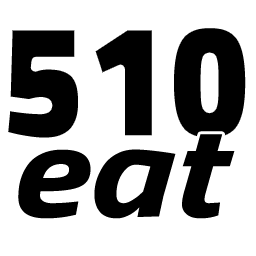
<style>
.page{position:relative;width:256px;height:256px;background:#ffffff}
.page>*{position:absolute;margin:0}
.t1{font:171px "TitilliumWeb-Black";color:#000000;scale:0.89 1}
.t2{font:130.9px "TitilliumWeb-BoldItalic";color:#000000;scale:1.22 1}
</style>
<div class="page">
<p class="t1" style="left:4px;top:24px;width:246px;height:118px">510</p>
<p class="t2" style="left:18px;top:134px;width:217px;height:85px">eat</p>
</div>
